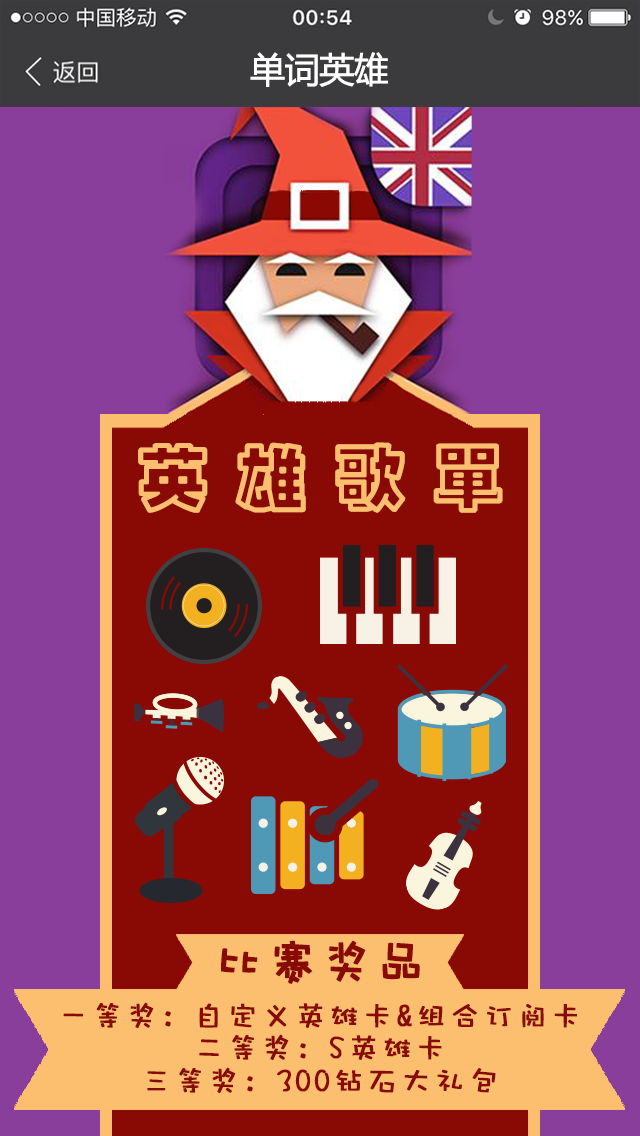
<style>
.page{position:relative;width:640px;height:1136px;background:#893e9b}
.page>*{position:absolute;margin:0}
.t1{font:35px "MicrosoftYaHei";letter-spacing:-0.04em;color:#ffffff;font-weight:bold}
.t2{font:72px "¾­µä¿ÕµþºÚ Regular";letter-spacing:0.34em;color:#fcbe6f;font-weight:bold}
.t3{font:48px "DFWaWaW5";letter-spacing:0.1em;color:#890904;font-weight:bold}
.t4{font:30px/32.3px "DFWaWaW5";letter-spacing:0.1em;color:#890904;font-weight:bold}
</style>
<div class="page">
<p class="t1" style="left:250px;top:52px;width:138px;height:35px">单词英雄</p>
<p class="t2" style="left:138px;top:442px;width:365px;height:71px">英雄歌单</p>
<p class="t3" style="left:221px;top:940px;width:199px;height:44px">比赛奖品</p>
<p class="t4" style="left:63px;top:1002px;width:514px;height:91px;text-align:center">一等奖：自定义英雄卡&amp;组合订阅卡<br>二等奖：S英雄卡<br>三等奖：300钻石大礼包</p>
</div>
